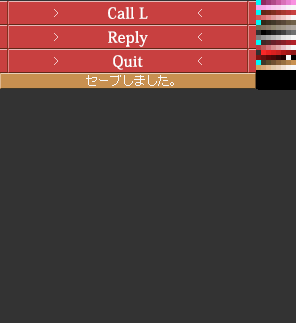
<style>
.page{position:relative;width:296px;height:323px;background:#333333}
.page>*{position:absolute;margin:0}
.t1{font:15px/24px "KozMinPro-Medium";letter-spacing:0.025em;color:#ffffff}
</style>
<div class="page">
<p class="t1" style="left:108px;top:7px;width:40px;height:63px;text-align:center">Call L<br>Reply<br>Quit</p>
</div>
